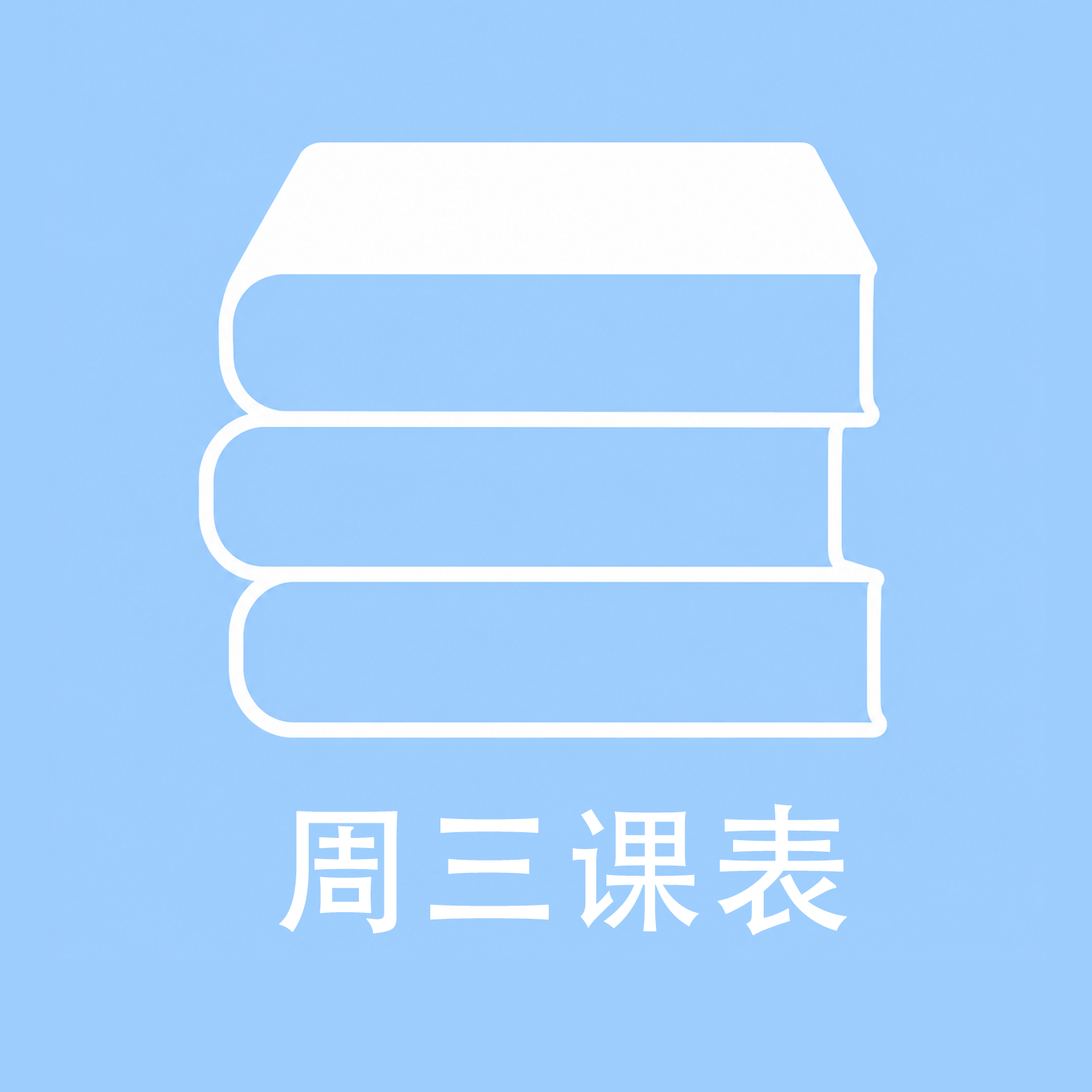
<style>
.page{position:relative;width:1092px;height:1092px;background:#9dcdfc}
.page>*{position:absolute;margin:0}
.t1{font:139.8px "AdobeHeitiStd-Regular";letter-spacing:0.02em;color:#ffffff;font-weight:bold}
</style>
<div class="page">
<p class="t1" style="left:279px;top:804px;width:568px;height:131px">周三课表</p>
</div>
